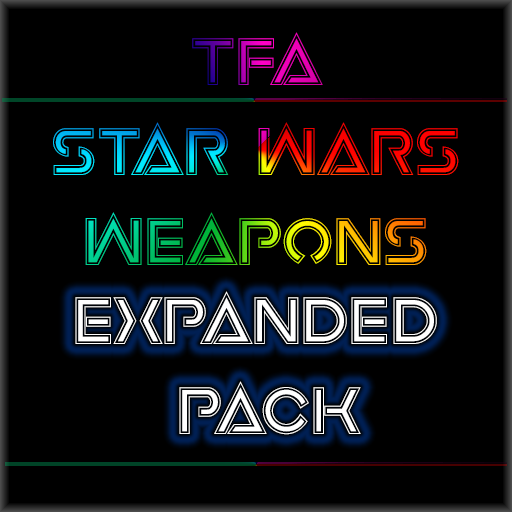
<style>
.page{position:relative;width:512px;height:512px;background:#000000}
.page>*{position:absolute;margin:0}
.t1{font:75px "EarthOrbiterAcademy"}
.t2{font:75px "EarthOrbiterAcademy";color:#ffffff}
</style>
<div class="page">
<p class="t1" style="left:53px;top:32px;width:406px;height:233px;text-align:center">Tfa<br>Star Wars<br>Weapons</p>
<p class="t2" style="left:75px;top:291px;width:362px;height:144px;text-align:center">Expanded <br>Pack</p>
</div>
